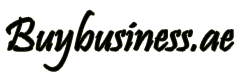
<style>
.page{position:relative;width:242px;height:74px;background:#ffffff}
.page>*{position:absolute;margin:0}
.t1{font:48px "Pristina-Regular";color:#000000}
</style>
<div class="page">
<p class="t1" style="left:6px;top:10px;width:228px;height:61px">Buybusiness.ae</p>
</div>
